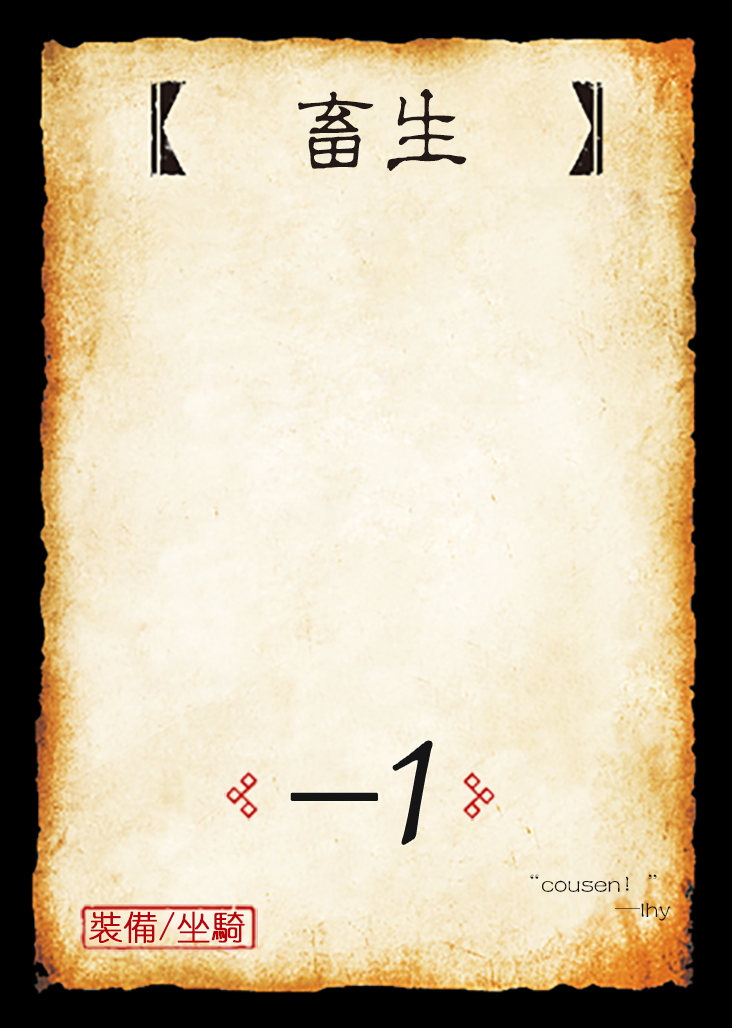
<style>
.page{position:relative;width:732px;height:1028px}
.page>*{position:absolute;margin:0}
.t1{font:95.8px "JMFLS_GBK";color:#221815;scale:0.95 1}
.t2{font:191.7px "Jxixinkai";color:#151515}
.t3{font:25px/25px "FZLBJW--GB1-0";color:#151515}
.t4{font:33.3px "YouYuan";color:#ba0007;font-weight:bold}
</style>
<div class="page">
<p class="t1" style="left:298px;top:89px;width:169px;height:82px">畜生</p>
<p class="t2" style="left:393px;top:741px;width:39px;height:103px">1</p>
<p class="t3" style="left:530px;top:874px;width:141px;height:47px;text-align:right">“cousen！”<br>—lhy</p>
<p class="t4" style="left:89px;top:911px;width:156px;height:33px">裝備/坐騎</p>
</div>
